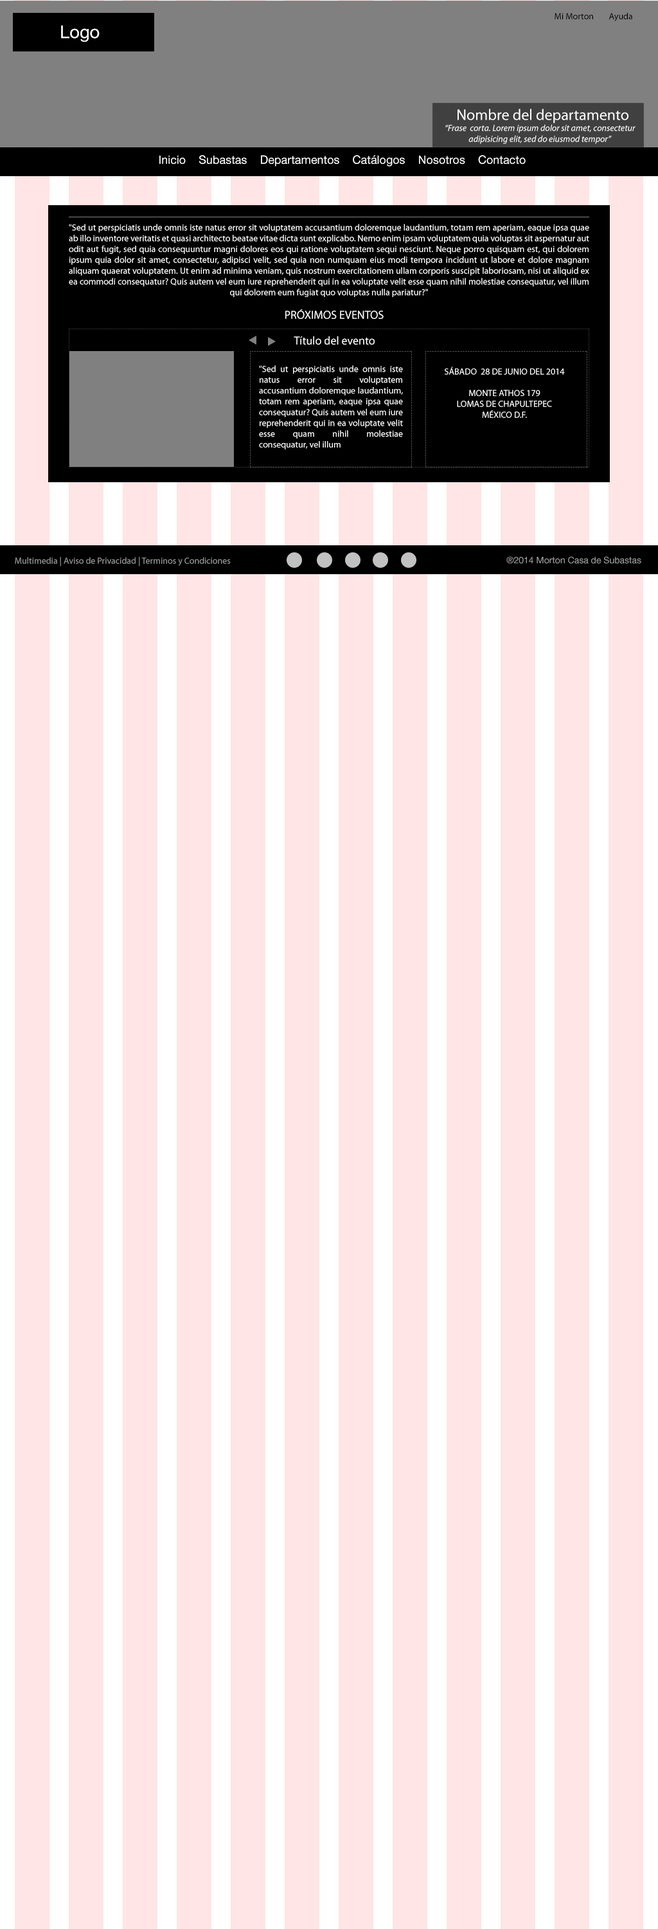
<style>
.page{position:relative;width:658px;height:1929px;background:#ffe5e5}
.page>*{position:absolute;margin:0}
.t1{font:9px "MyriadPro-Regular";color:#000000}
.t2{font:17.5px "HelveticaNeue";color:#ffffff}
.t3{font:15.4px "MyriadPro-Regular";color:#ffffff}
.t4{font:9px "MyriadPro-It";color:#ffffff}
.t5{font:11.6px "HelveticaNeue";color:#ffffff}
.t6{font:9px "MyriadPro-Regular";color:#ffffff}
.t7{font:11.6px "MyriadPro-Regular";color:#ffffff}
.t8{font:9px "MyriadPro-Regular";color:#999999}
.t9{font:9px "HelveticaNeue";color:#999999}
</style>
<div class="page">
<p class="t1" style="left:555px;top:13px;width:38px;height:6px">Mi Morton</p>
<p class="t1" style="left:609px;top:13px;width:24px;height:8px">Ayuda</p>
<p class="t2" style="left:61px;top:25px;width:39px;height:17px">Logo</p>
<p class="t3" style="left:458px;top:109px;width:171px;height:14px">Nombre del departamento</p>
<p class="t4" style="left:446px;top:124px;width:190px;height:20px;text-align:center">“Frase  corta. Lorem ipsum dolor sit amet, consectetur <br>adipisicing elit, sed do eiusmod tempor”</p>
<p class="t5" style="left:159px;top:155px;width:367px;height:11px">Inicio    Subastas    Departamentos    Catálogos    Nosotros    Contacto</p>
<p class="t6" style="left:69px;top:224px;width:521px;height:73px;text-align:justify">"Sed ut perspiciatis unde omnis iste natus error sit voluptatem accusantium doloremque laudantium, totam rem aperiam, eaque ipsa quae ab illo inventore veritatis et quasi architecto beatae vitae dicta sunt explicabo. Nemo enim ipsam voluptatem quia voluptas sit aspernatur aut odit aut fugit, sed quia consequuntur magni dolores eos qui ratione voluptatem sequi nesciunt. Neque porro quisquam est, qui dolorem ipsum quia dolor sit amet, consectetur, adipisci velit, sed quia non numquam eius modi tempora incidunt ut labore et dolore magnam aliquam quaerat voluptatem. Ut enim ad minima veniam, quis nostrum exercitationem ullam corporis suscipit laboriosam, nisi ut aliquid ex ea commodi consequatur? Quis autem vel eum iure reprehenderit qui in ea voluptate velit esse quam nihil molestiae consequatur, vel illum qui dolorem eum fugiat quo voluptas nulla pariatur?"</p>
<p class="t7" style="left:285px;top:309px;width:99px;height:10px">PRÓXIMOS EVENTOS</p>
<p class="t7" style="left:294px;top:336px;width:81px;height:9px">Título del evento</p>
<p class="t6" style="left:259px;top:365px;width:144px;height:84px;text-align:justify">"Sed ut perspiciatis unde omnis iste natus error sit voluptatem accusantium doloremque laudantium, totam rem aperiam, eaque ipsa quae consequatur? Quis autem vel eum iure reprehenderit qui in ea voluptate velit esse quam nihil molestiae consequatur, vel illum</p>
<p class="t6" style="left:445px;top:366px;width:120px;height:52px;text-align:center">SÁBADO  28 DE JUNIO DEL 2014<br><br>MONTE ATHOS 179<br>LOMAS DE CHAPULTEPEC<br>MÉXICO D.F.</p>
<p class="t8" style="left:15px;top:557px;width:216px;height:9px">Multimedia | Aviso de Privacidad | Terminos y Condiciones</p>
<p class="t9" style="left:507px;top:556px;width:135px;height:8px">®2014 Morton Casa de Subastas</p>
</div>
